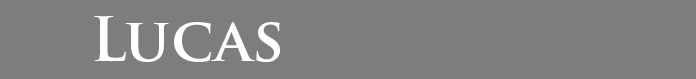
<style>
.page{position:relative;width:696px;height:79px;background:#7d7d7d}
.page>*{position:absolute;margin:0}
.t1{font:60px "TrajanPro-Bold";letter-spacing:0.01em;color:#ffffff}
</style>
<div class="page">
<p class="t1" style="left:94px;top:16px;width:186px;height:46px">Lucas</p>
</div>
